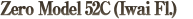
<style>
.page{position:relative;width:193px;height:19px;background:#ffffff}
.page>*{position:absolute;margin:0}
.t1{font:18px "RyuminPro-ExBold";letter-spacing:-0.08em;color:#4a3f32;font-weight:bold;scale:0.9 1}
</style>
<div class="page">
<p class="t1" style="left:0px;top:1px;width:177px;height:18px">Zero Model 52C (Iwai Fl.)</p>
</div>
